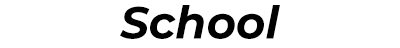
<style>
.page{position:relative;width:400px;height:48px;background:#ffffff}
.page>*{position:absolute;margin:0}
.t1{font:45px "Montserrat-BoldItalic";color:#000000}
</style>
<div class="page">
<p class="t1" style="left:120px;top:5px;width:160px;height:34px">School</p>
</div>
